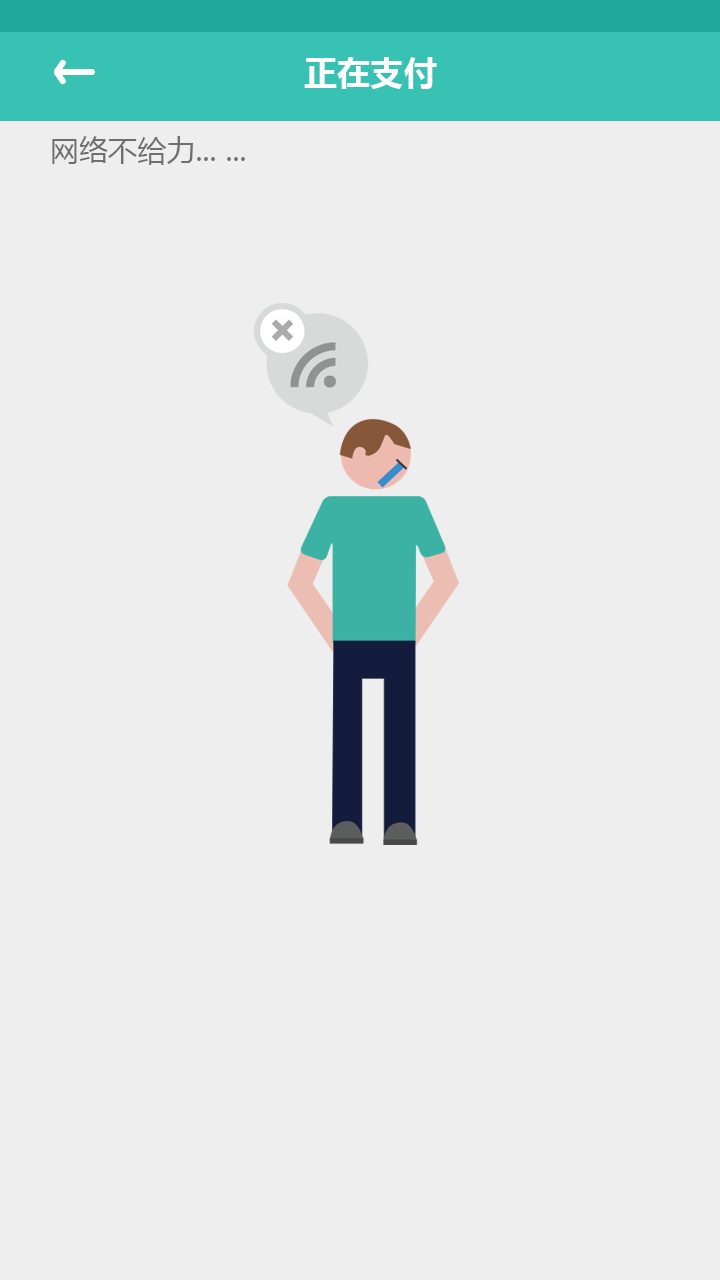
<style>
.page{position:relative;width:720px;height:1280px;background:#eeeeee}
.page>*{position:absolute;margin:0}
.t1{font:33.3px "MicrosoftYaHei-Bold";color:#fefefe}
.t2{font:29.2px "MicrosoftYaHei";color:#6e6e6e}
</style>
<div class="page">
<p class="t1" style="left:304px;top:57px;width:133px;height:32px">正在支付</p>
<p class="t2" style="left:52px;top:136px;width:193px;height:29px">网络不给力... ...</p>
</div>
